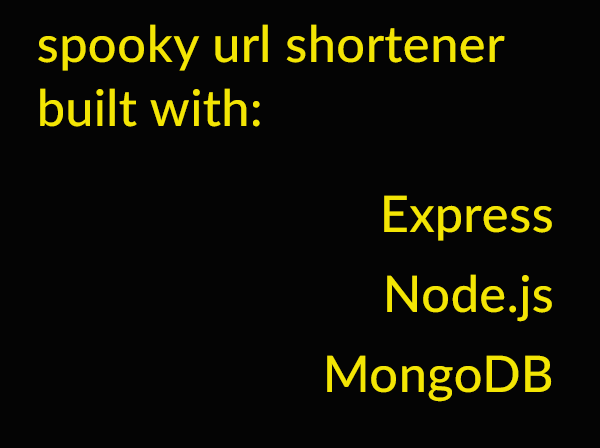
<style>
.page{position:relative;width:600px;height:448px;background:#040404}
.page>*{position:absolute;margin:0}
.t1{font:50.4px/16px "Lato-Medium";letter-spacing:0.01em;color:#f3e504}
</style>
<div class="page">
<p class="t1" style="left:38px;top:24px;width:467px;height:103px">spooky url shortener<br><br><br><br>built with:</p>
<p class="t1" style="left:327px;top:195px;width:225px;height:207px;text-align:right">Express<br><br><br><br><br>Node.js<br><br><br><br><br>MongoDB</p>
</div>
